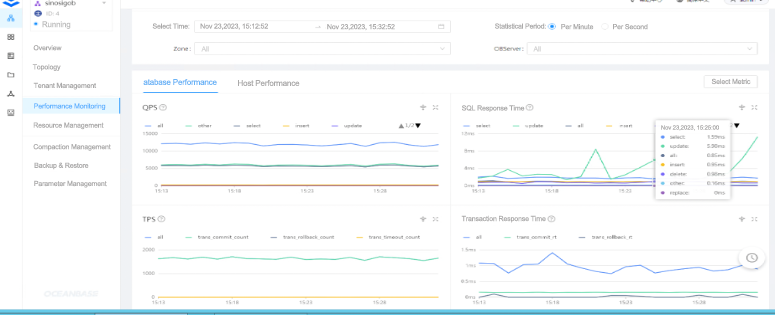
<style>
.page{position:relative;width:776px;height:316px;background:#ffffff}
.page>*{position:absolute;margin:0}
.t1{font:8px "ArialMT";letter-spacing:-0.02em;color:#bebebe}
.t2{font:7px "ArialMT";letter-spacing:-0.02em;color:#abaaaa}
.t3{font:7px "ArialMT";letter-spacing:-0.02em;color:#d4d4d4}
.t4{font:8px "ArialMT";letter-spacing:-0.02em;color:#6ab4f6}
.t5{font:8px "ArialMT";letter-spacing:-0.02em;color:#abaaaa}
.t6{font:7px "ArialMT";letter-spacing:-0.02em;color:#67b6ff}
.t7{font:6px "ArialMT";letter-spacing:-0.02em;color:#abaaaa}
</style>
<div class="page">
<p class="t1" style="left:42px;top:21px;width:29px;height:8px">Running</p>
<p class="t2" style="left:152px;top:23px;width:38px;height:6px">Select Time:</p>
<p class="t2" style="left:200px;top:23px;width:68px;height:7px">Nov 23,2023, 15:12:52</p>
<p class="t2" style="left:327px;top:24px;width:68px;height:7px">Nov 23,2023, 15:32:52</p>
<p class="t2" style="left:495px;top:23px;width:51px;height:6px">Statistical Period:</p>
<p class="t2" style="left:561px;top:24px;width:33px;height:6px">Per Minute</p>
<p class="t2" style="left:613px;top:24px;width:35px;height:6px">Per Second</p>
<p class="t2" style="left:33px;top:45px;width:29px;height:6px">Overview</p>
<p class="t3" style="left:201px;top:46px;width:8px;height:6px">All</p>
<p class="t3" style="left:533px;top:46px;width:8px;height:6px">All</p>
<p class="t2" style="left:32px;top:64px;width:29px;height:7px">Topology</p>
<p class="t2" style="left:711px;top:78px;width:40px;height:7px">Select Metric</p>
<p class="t2" style="left:33px;top:82px;width:64px;height:8px">Tenant Management</p>
<p class="t4" style="left:143px;top:79px;width:74px;height:6px">atabase Performance</p>
<p class="t5" style="left:238px;top:80px;width:62px;height:6px">Host Performance</p>
<p class="t6" style="left:34px;top:103px;width:72px;height:7px">Performance Monitoring</p>
<p class="t2" style="left:462px;top:105px;width:63px;height:7px">SQL Response Time</p>
<p class="t2" style="left:33px;top:122px;width:71px;height:8px">Resource Management</p>
<p class="t7" style="left:661px;top:125px;width:58px;height:6px">Nov 23,2023, 15:25:00</p>
<p class="t2" style="left:33px;top:144px;width:78px;height:7px">Compaction Management</p>
<p class="t2" style="left:34px;top:162px;width:55px;height:8px">Backup &amp; Restore</p>
<p class="t2" style="left:34px;top:180px;width:73px;height:8px">Parameter Management</p>
<p class="t2" style="left:461px;top:215px;width:85px;height:8px">Transaction Response Time</p>
</div>
